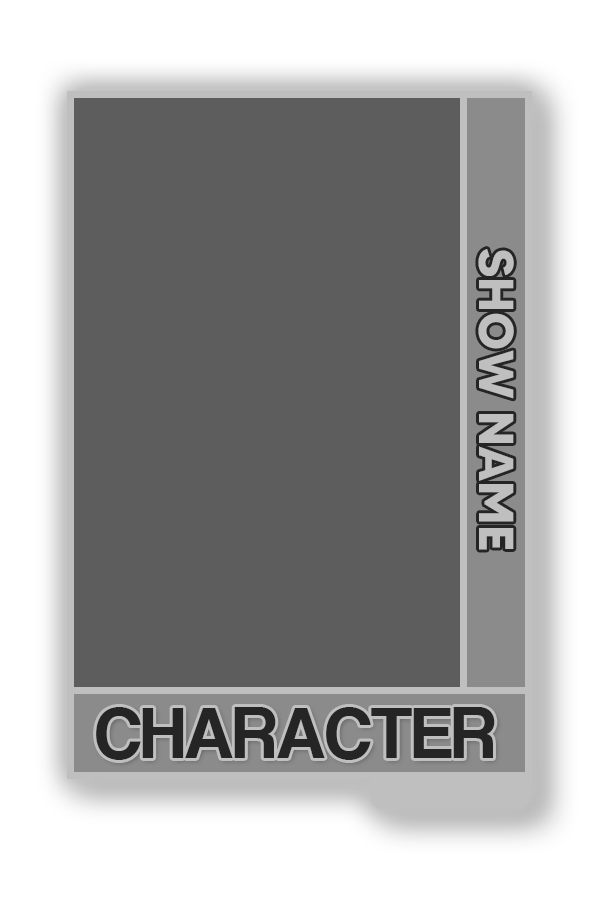
<style>
.page{position:relative;width:600px;height:900px;background:#5d5d5d}
.page>*{position:absolute;margin:0}
.t1{font:48.8px "MADETOMMY-Bold";color:#bfbfbf}
.t2{font:75px "CoolveticaRg-Regular";color:#252525}
</style>
<div class="page">
<p class="t1" style="left:478px;top:249px;width:36px;height:301px;rotate:90deg">SHOW NAME</p>
<p class="t2" style="left:96px;top:707px;width:399px;height:53px">CHARACTER</p>
</div>
